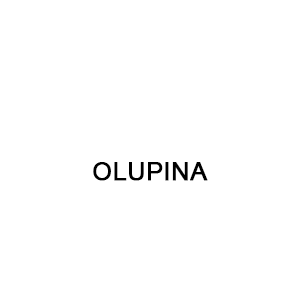
<style>
.page{position:relative;width:300px;height:300px;background:#ffffff}
.page>*{position:absolute;margin:0}
.t1{font:25.4px "ArialMT";color:#000000;font-weight:bold}
</style>
<div class="page">
<p class="t1" style="left:93px;top:162px;width:115px;height:19px">OLUPINA</p>
</div>
